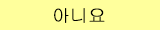
<style>
.page{position:relative;width:160px;height:30px;background:#ffff9c}
.page>*{position:absolute;margin:0}
.t1{font:18px "Gulim";color:#000000}
</style>
<div class="page">
<p class="t1" style="left:54px;top:8px;width:51px;height:15px">아니요</p>
</div>
